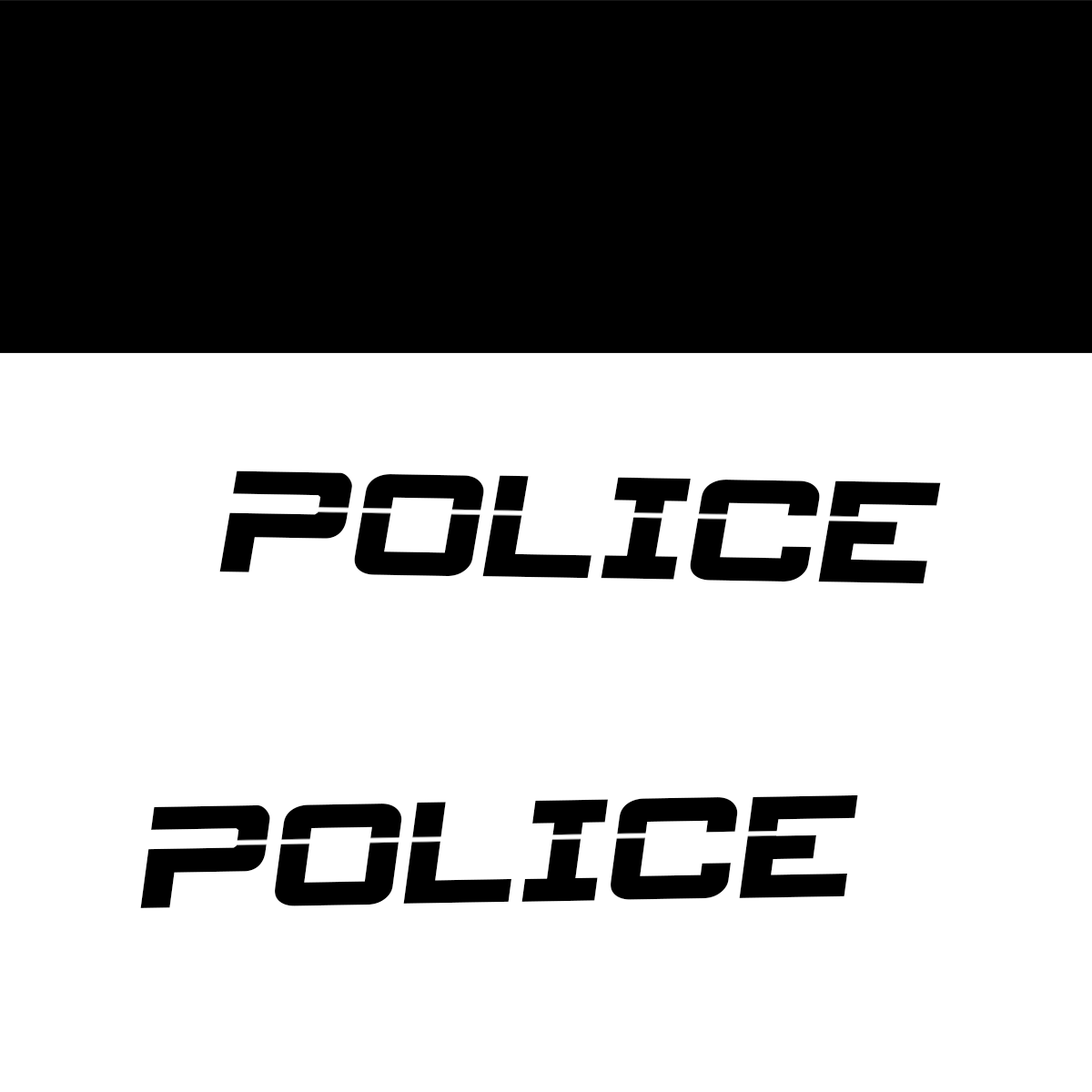
<style>
.page{position:relative;width:1092px;height:1092px;background:#ffffff}
.page>*{position:absolute;margin:0}
.t1{font:39.2px "SpyAgency";color:#000000}
</style>
<div class="page">
<p class="t1" style="left:219px;top:470px;width:722px;height:114px;rotate:1deg">POLICE</p>
<p class="t1" style="left:140px;top:794px;width:718px;height:114px;rotate:-1deg">POLICE</p>
</div>
